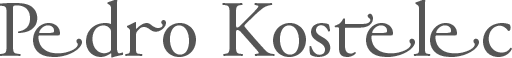
<style>
.page{position:relative;width:512px;height:58px;background:#ffffff}
.page>*{position:absolute;margin:0}
.t1{font:80px "AGaramondPro-Regular";color:#555555}
</style>
<div class="page">
<p class="t1" style="left:0px;top:0px;width:512px;height:58px">Pedro Kostelec</p>
</div>
